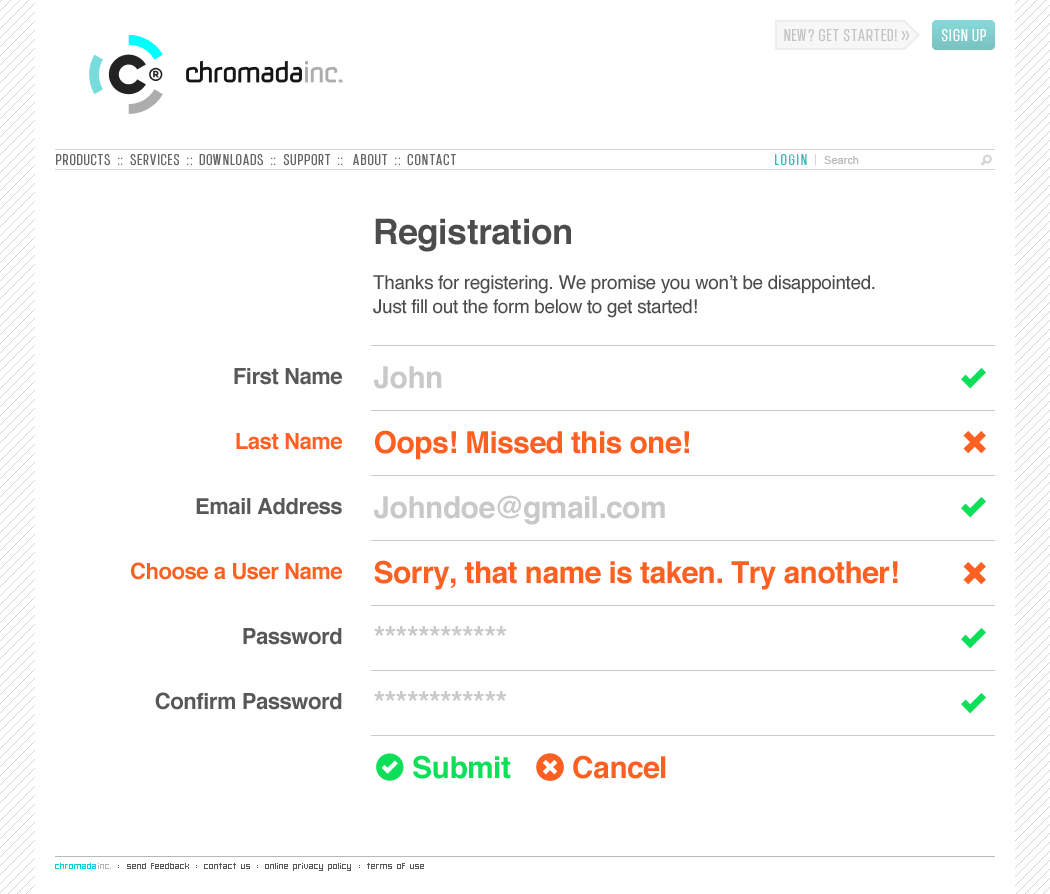
<style>
.page{position:relative;width:1050px;height:894px;background:#ffffff}
.page>*{position:absolute;margin:0}
.t1{font:17px "ChromadicaCondensed";letter-spacing:0.06em;color:#c4c4c4}
.t2{font:17px "ChromadicaCondensed";letter-spacing:0.06em;color:#ffffff}
.t3{font:15px "ChromadicaCondensed";letter-spacing:0.08em;color:#676666}
.t4{font:15px "ChromadicaCondensed";letter-spacing:0.1em;color:#35b9b9}
.t5{font:15px "ChromadicaCondensed";letter-spacing:0.12em;color:#35b9b9}
.t6{font:15px "ChromadicaCondensed";letter-spacing:0.18em;color:#35b9b9}
.t7{font:15px "ChromadicaCondensed";color:#35b9b9}
.t8{font:11px "ArialMT";color:#b9b9b9}
.t9{font:19px/24px "Helvetica";letter-spacing:-0.02em;color:#4c4c4c}
.t10{font:35px/30px "Helvetica-Bold";letter-spacing:-0.01em;color:#4c4c4c}
.t11{font:30px/65px "Helvetica-Bold";letter-spacing:-0.02em;color:#fe6022}
.t12{font:30px/65px "Helvetica-Bold";letter-spacing:-0.02em;color:#c9c9c9}
.t13{font:30px/65px "Helvetica-Bold";letter-spacing:-0.02em;color:#0edf58}
.t14{font:22px/65px "Helvetica-Bold";letter-spacing:-0.02em;color:#585858}
.t15{font:22px/65px "Helvetica-Bold";letter-spacing:-0.02em;color:#fe6022}
</style>
<div class="page">
<p class="t1" style="left:784px;top:28px;width:202px;height:14px">NEW? GET STARTED! &gt;&gt;          <span class="t2">SIGN UP</span></p>
<p class="t3" style="left:56px;top:154px;width:803px;height:12px">PRODUCTS  ::  SERVICES  ::  DOWNLOADS  ::  SUPPORT  ::   ABOUT  ::  CONTACT                                                                                                    <span class="t4">LO</span><span class="t5">G</span><span class="t6">I</span><span class="t7">N    </span><span class="t8">Search</span></p>
<p class="t9" style="left:373px;top:218px;width:502px;height:100px"><span class="t10">Registration<br> <br></span>Thanks for registering. We promise you won’t be disappointed. Just fill out the form below to get started!</p>
<p class="t11" style="left:374px;top:366px;width:524px;height:413px"><span class="t12">John<br></span>Oops! Missed this one!<br><span class="t12">Johndoe@gmail.com<br></span>Sorry, that name is taken. Try another!<br><span class="t12">************<br>************<br>     </span><span class="t13">Submit        </span>Cancel</p>
<p class="t14" style="left:131px;top:368px;width:211px;height:342px;text-align:right">First Name<br><span class="t15">Last Name<br></span>Email Address<br><span class="t15">Choose a User Name<br></span>Password<br>Confirm Password</p>
</div>
